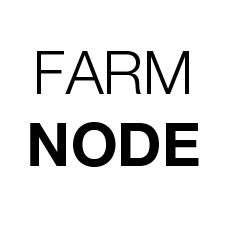
<style>
.page{position:relative;width:225px;height:225px;background:#ffffff}
.page>*{position:absolute;margin:0}
.t1{font:60px/72px "HelveticaNeueLTStd-Lt";color:#000000}
.t2{font:60px/72px "HelveticaNeueLTStd-Bd";color:#000000}
</style>
<div class="page">
<p class="t1" style="left:30px;top:51px;width:169px;height:116px;text-align:center">FARM<br><span class="t2">NODE</span></p>
</div>
